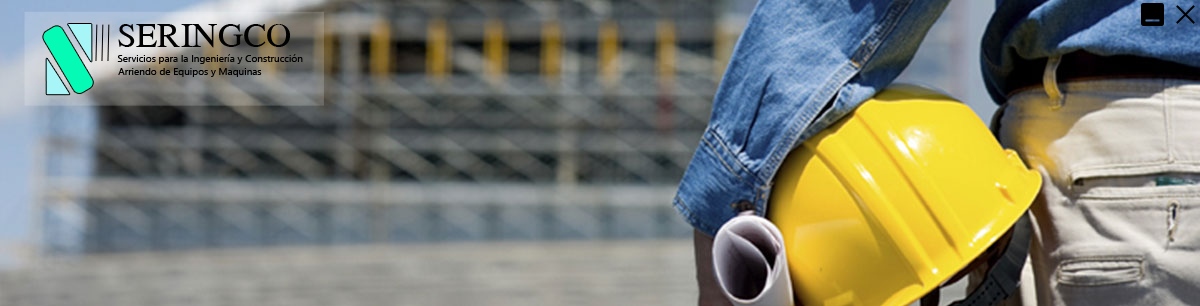
<style>
.page{position:relative;width:1200px;height:306px}
.page>*{position:absolute;margin:0}
.t1{font:53px "KodchiangUPC";color:#010101}
.t2{font:10px "SegoeUI";color:#010101}
.t3{font:10px "SegoeUI";color:#000000}
</style>
<div class="page">
<p class="t1" style="left:118px;top:24px;width:173px;height:24px">SERINGCO</p>
<p class="t2" style="left:117px;top:54px;width:186px;height:10px">Servicios para la Ingeniería y Construcción</p>
<p class="t3" style="left:118px;top:68px;width:144px;height:9px">Arriendo de Equipos y Maquinas</p>
</div>
